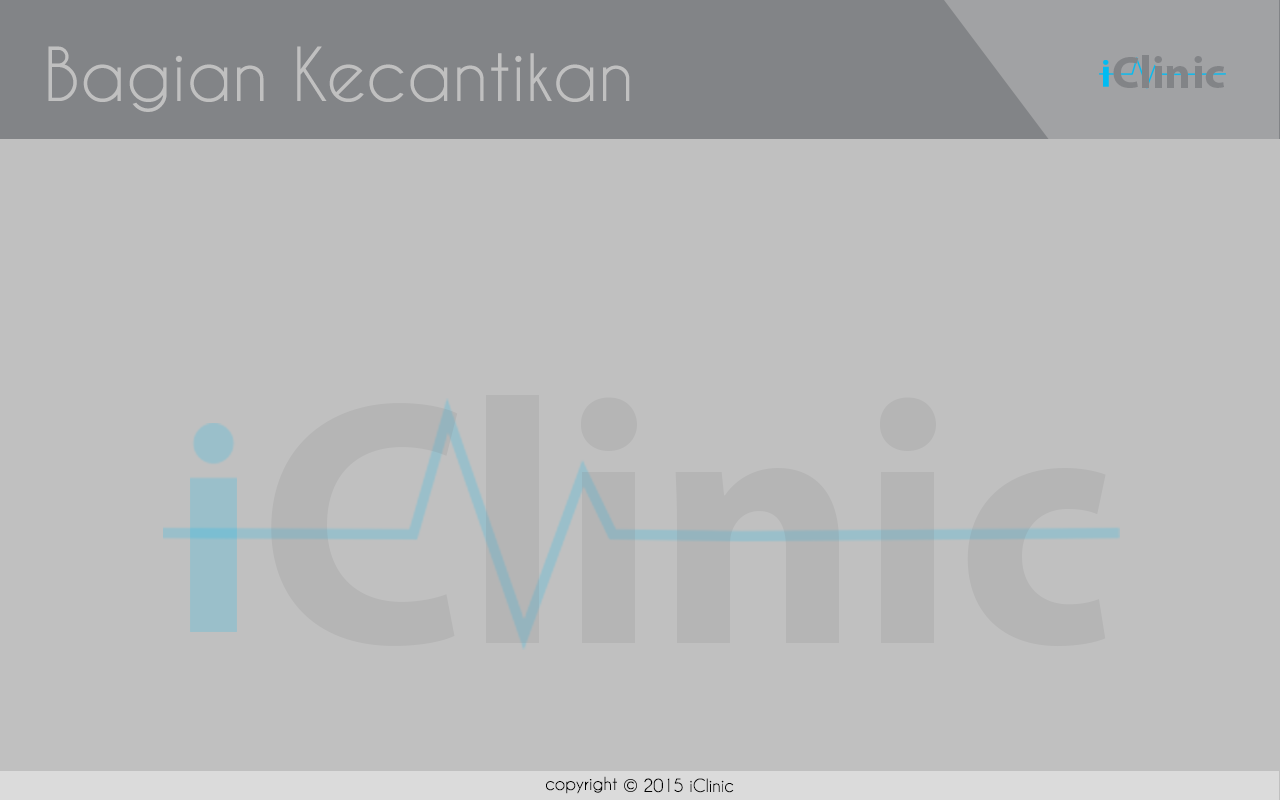
<style>
.page{position:relative;width:1280px;height:800px;background:#c0c0c0}
.page>*{position:absolute;margin:0}
.t1{font:69.4px "CaviarDreams";color:#c0c0c0}
.t2{font:45.1px "MyriadPro-Bold";color:#828487}
.t3{font:350px "MyriadPro-Bold";color:#b5b5b5}
.t4{font:16.8px "CaviarDreams";color:#000000}
.t5{font:14.3px "CaviarDreams";color:#000000}
.t6{font:16.9px "CaviarDreams";color:#000000}
</style>
<div class="page">
<p class="t1" style="left:48px;top:46px;width:582px;height:66px">Bagian Kecantikan</p>
<p class="t2" style="left:1113px;top:55px;width:111px;height:33px">Clinic</p>
<p class="t3" style="left:271px;top:395px;width:835px;height:252px">Clinic</p>
<p class="t4" style="left:546px;top:776px;width:71px;height:18px">copyright</p>
<p class="t5" style="left:627px;top:781px;width:7px;height:9px">c</p>
<p class="t6" style="left:644px;top:778px;width:90px;height:15px">2015 iClinic</p>
</div>
